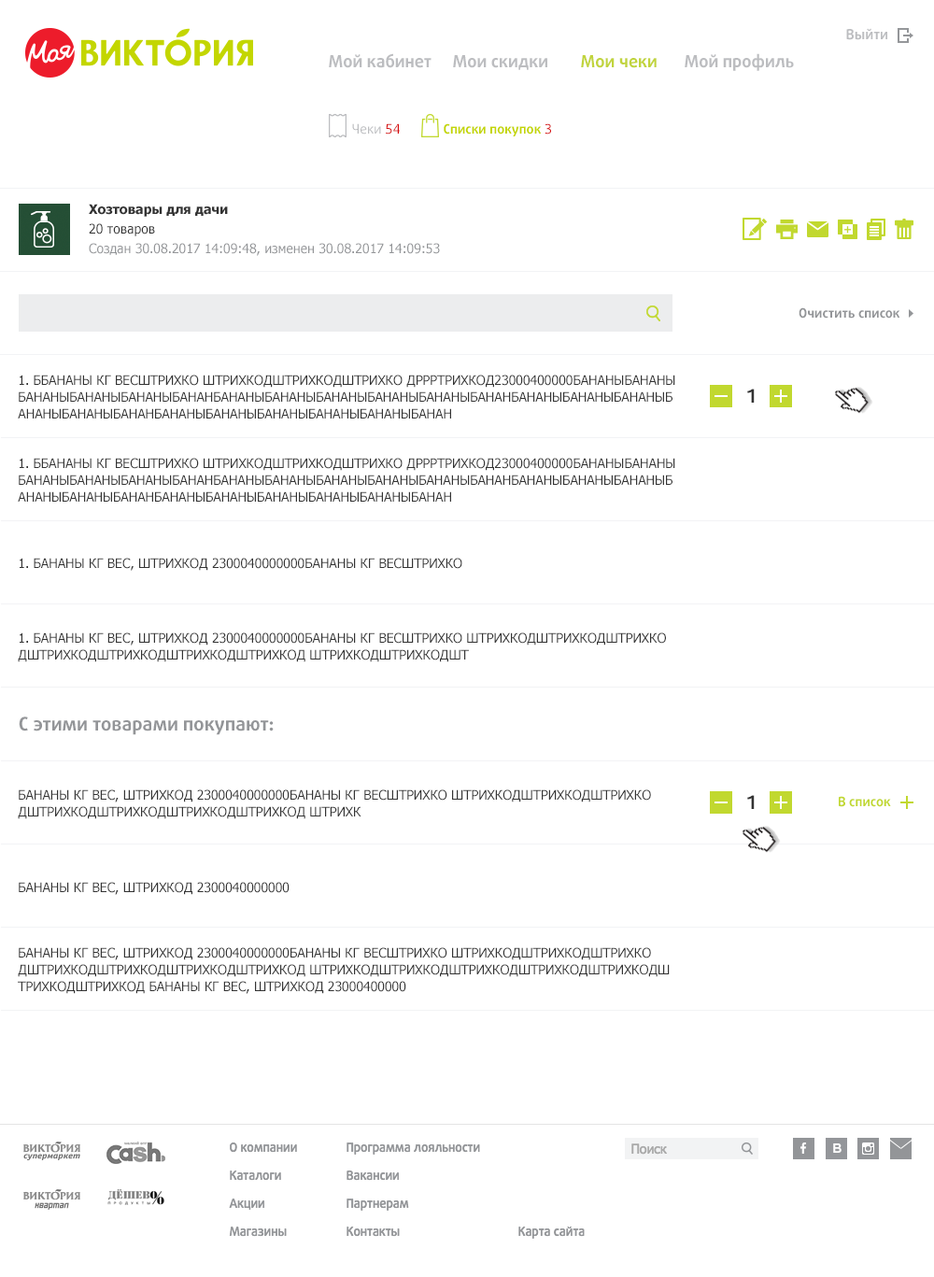
<style>
.page{position:relative;width:934px;height:1277px;background:#ffffff}
.page>*{position:absolute;margin:0}
.t1{font:14px "DaxlineOffcPro-Bold";color:#bcbdc0}
.t2{font:16.8px "DaxlineOffcPro-Bold";color:#bcbdc0}
.t3{font:16.8px "DaxlineOffcPro-Bold";color:#c1d43c}
.t4{font:13.1px "DaxlineOffcPro";color:#bcbdc0}
.t5{font:13.1px "DaxlineOffcPro";color:#d6090b}
.t6{font:13.1px "DaxlineOffcPro-Bold";color:#c4d600}
.t7{font:13.1px "Tahoma-Bold";color:#333333}
.t8{font:13.1px "Tahoma";color:#333333}
.t9{font:13.1px "Tahoma";color:#939598}
.t10{font:13.1px "DaxlineOffcPro-Bold";color:#939598}
.t11{font:13.1px/16.8px "Tahoma";color:#333333;text-transform:uppercase}
.t12{font:18.7px "DaxlineOffcPro-Bold";color:#333333;text-transform:uppercase}
.t13{font:13.1px "Tahoma";color:#333333;text-transform:uppercase}
.t14{font:18.7px "DaxlinePro-Bold";color:#939598}
.t15{font:13.1px "DaxlineOffcPro-Bold";color:#c1d82f}
</style>
<div class="page">
<p class="t1" style="left:846px;top:28px;width:41px;height:12px">Выйти</p>
<p class="t2" style="left:329px;top:53px;width:102px;height:15px">Мой кабинет</p>
<p class="t2" style="left:685px;top:53px;width:109px;height:18px">Мой профиль</p>
<p class="t2" style="left:453px;top:55px;width:94px;height:15px">Мои скидки</p>
<p class="t3" style="left:581px;top:55px;width:76px;height:13px">Мои чеки</p>
<p class="t4" style="left:352px;top:123px;width:48px;height:11px">Чеки <span class="t5">54</span></p>
<p class="t6" style="left:444px;top:123px;width:107px;height:13px">Списки покупок <span class="t5">3</span></p>
<p class="t7" style="left:89px;top:204px;width:139px;height:13px">Хозтовары для дачи</p>
<p class="t8" style="left:89px;top:223px;width:66px;height:13px">20 товаров</p>
<p class="t9" style="left:89px;top:243px;width:351px;height:13px">Создан 30.08.2017 14:09:48, изменен 30.08.2017 14:09:53</p>
<p class="t10" style="left:799px;top:307px;width:101px;height:11px">Очистить список</p>
<p class="t11" style="left:18px;top:375px;width:657px;height:43px">1. ББананы кг весШтрихко ШтрихкодШтрихкодШтрихко дррртрихкод23000400000бананыбананы<br>бананыбананыбананыбананбананыбананыбананыбананыбананыбананбананыбананыбананыб<br>ананыбананыбананбананыбананыбананыбананыбананыбанан</p>
<p class="t12" style="left:747px;top:389px;width:8px;height:14px">1</p>
<p class="t11" style="left:18px;top:458px;width:657px;height:44px">1. ББананы кг весШтрихко ШтрихкодШтрихкодШтрихко дррртрихкод23000400000бананыбананы<br>бананыбананыбананыбананбананыбананыбананыбананыбананыбананбананыбананыбананыб<br>ананыбананыбананбананыбананыбананыбананыбананыбанан</p>
<p class="t13" style="left:20px;top:558px;width:442px;height:13px">1. Бананы кг вес, Штрихкод 2300040000000Бананы кг весШтрихко</p>
<p class="t11" style="left:18px;top:632px;width:648px;height:30px">1. Бананы кг вес, Штрихкод 2300040000000Бананы кг весШтрихко ШтрихкодШтрихкодШтрихко<br>дШтрихкодШтрихкодШтрихкодШтрихкод ШтрихкодШтрихкодШт</p>
<p class="t14" style="left:19px;top:716px;width:255px;height:19px">С этими товарами покупают:</p>
<p class="t11" style="left:18px;top:789px;width:633px;height:30px">Бананы кг вес, Штрихкод 2300040000000Бананы кг весШтрихко ШтрихкодШтрихкодШтрихко<br>дШтрихкодШтрихкодШтрихкодШтрихкод Штрихк</p>
<p class="t12" style="left:747px;top:795px;width:8px;height:14px">1</p>
<p class="t15" style="left:839px;top:796px;width:52px;height:11px">В список</p>
<p class="t13" style="left:19px;top:882px;width:271px;height:13px">Бананы кг вес, Штрихкод 2300040000000</p>
<p class="t11" style="left:18px;top:947px;width:652px;height:47px">Бананы кг вес, Штрихкод 2300040000000Бананы кг весШтрихко ШтрихкодШтрихкодШтрихко<br>дШтрихкодШтрихкодШтрихкодШтрихкод ШтрихкодШтрихкодШтрихкодШтрихкодШтрихкодШ<br>трихкодШтрихкод Бананы кг вес, Штрихкод 23000400000</p>
</div>
